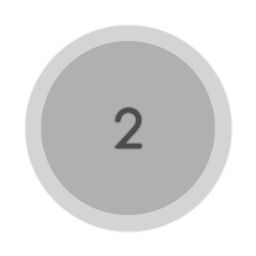
<style>
.page{position:relative;width:256px;height:256px;background:#ffffff}
.page>*{position:absolute;margin:0}
.t1{font:53.9px "CenturyGothic";color:#4d4d4d}
</style>
<div class="page">
<p class="t1" style="left:114px;top:108px;width:28px;height:40px">2</p>
</div>
